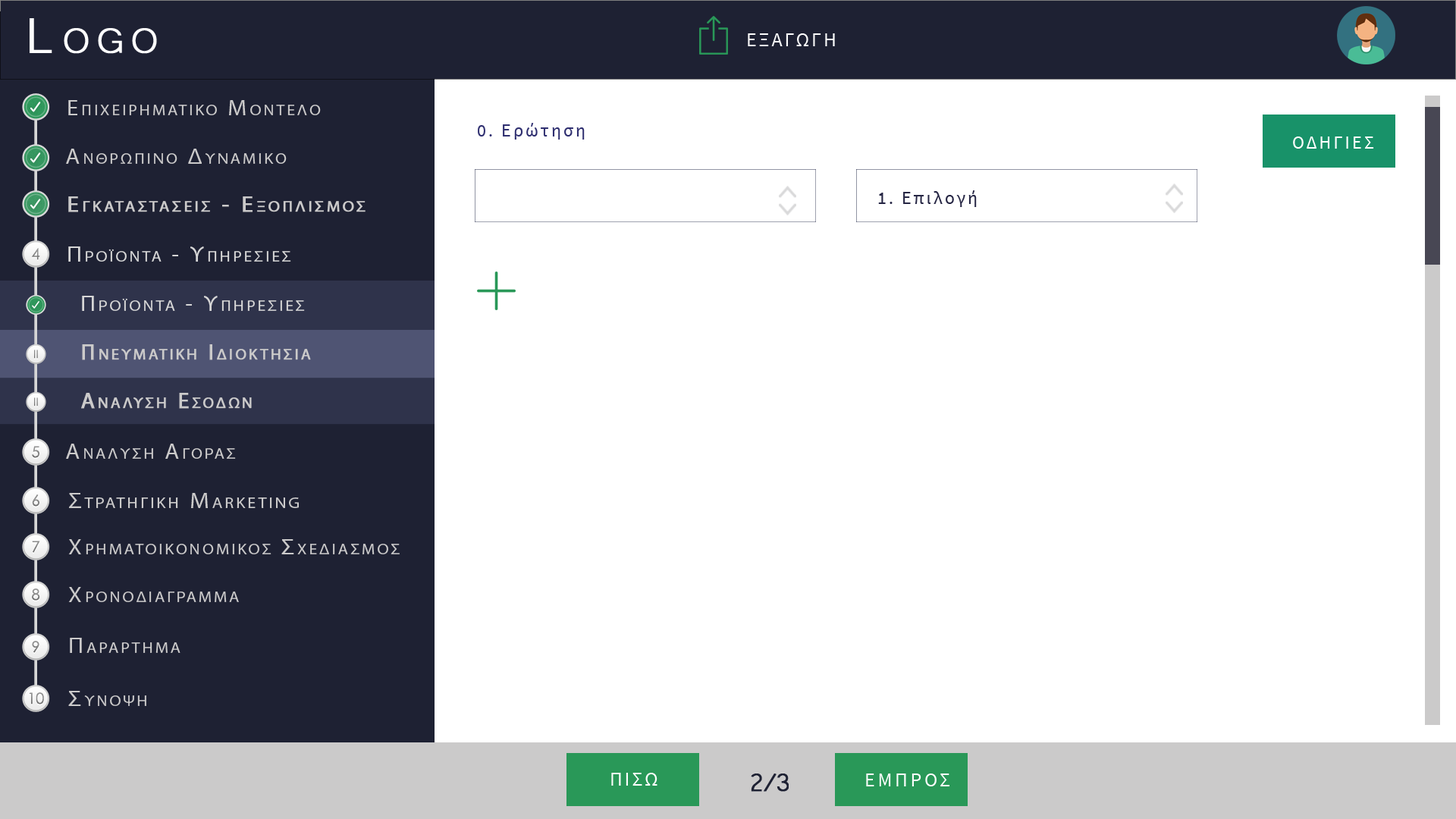
<style>
.page{position:relative;width:1456px;height:819px;background:#ffffff}
.page>*{position:absolute;margin:0}
.t1{font:63.7px "Microsoft-Yi-Baiti";letter-spacing:0.13em;color:#ffffff;font-variant:small-caps;font-weight:bold}
.t2{font:20px "SourceSansPro-Regular";letter-spacing:0.1em;color:#fefefe;text-transform:uppercase}
.t3{font:21.7px "MyriadPro-Regular";letter-spacing:0.13em;color:#cbcaca;font-variant:small-caps;scale:1.09 1}
.t4{font:23.4px "Microsoft-Yi-Baiti";letter-spacing:0.13em;color:#cbcaca;font-variant:small-caps;font-weight:bold}
.t5{font:18.2px "SourceSansPro-Regular";letter-spacing:0.13em;color:#2f2f70}
.t6{font:18.2px "SourceSansPro-Regular";letter-spacing:0.13em;color:#2f2f70;text-transform:uppercase}
.t7{font:18.2px "SourceSansPro-Regular";letter-spacing:0.13em;color:#ffffff;text-transform:uppercase}
.t8{font:21.7px/91px "MyriadPro-Regular";letter-spacing:0.13em;color:#cbcaca;font-variant:small-caps;font-weight:bold;scale:1.09 1}
.t9{font:23.4px/91px "Microsoft-Yi-Baiti";letter-spacing:0.13em;color:#cbcaca;font-variant:small-caps;font-weight:bold}
.t10{font:18.2px "SourceSansPro-Regular";letter-spacing:0.13em;color:#262644}
.t11{font:18.2px "SourceSansPro-Regular";letter-spacing:0.13em;color:#262644;text-transform:uppercase}
.t12{font:15.3px "CenturyGothic";color:#878787}
.t13{font:21.7px "MyriadPro-Regular";letter-spacing:0.13em;color:#d6d6d6;font-variant:small-caps;scale:1.09 1}
.t14{font:23.4px "Microsoft-Yi-Baiti";letter-spacing:0.13em;color:#d6d6d6;font-variant:small-caps;font-weight:bold}
.t15{font:11.2px "CenturyGothic";color:#828282}
.t16{font:22.3px "MyriadPro-Regular";letter-spacing:0.13em;color:#cbcaca;font-variant:small-caps;font-weight:bold}
.t17{font:15.3px "CenturyGothic";color:#898989}
.t18{font:15.3px "CenturyGothic";color:#838383}
.t19{font:22.2px "MyriadPro-Regular";letter-spacing:0.13em;color:#cbcaca;font-variant:small-caps;scale:1.09 1}
.t20{font:25.5px "Microsoft-Yi-Baiti";letter-spacing:0.13em;color:#cbcaca;font-variant:small-caps;font-weight:bold}
.t21{font:15.3px "CenturyGothic";color:#888888}
.t22{font:15.3px "CenturyGothic";color:#8b8b8b}
.t23{font:23.7px "Microsoft-Yi-Baiti";letter-spacing:0.13em;color:#cbcaca;font-variant:small-caps;scale:1.09 1}
.t24{font:32.8px "Microsoft-Yi-Baiti";letter-spacing:-0.1em;color:#1e2133;font-weight:bold}
.t25{font:20px "SourceSansPro-Regular";letter-spacing:0.13em;color:#fefefe;text-transform:uppercase}
</style>
<div class="page">
<p class="t1" style="left:30px;top:18px;width:127px;height:36px">Logo</p>
<p class="t2" style="left:748px;top:33px;width:87px;height:13px">εξαγωγη</p>
<p class="t3" style="left:68px;top:100px;width:253px;height:15px"><span class="t4">   </span>Επιχειρηματικο Μοντελο</p>
<p class="t5" style="left:478px;top:123px;width:107px;height:17px"><span class="t6">0. </span>Ερώτηση</p>
<p class="t7" style="left:1293px;top:136px;width:81px;height:13px">Οδηγιεσ</p>
<p class="t3" style="left:66px;top:149px;width:221px;height:15px"><span class="t4">   </span>Ανθρωπινο Δυναμικο</p>
<p class="t8" style="left:68px;top:196px;width:298px;height:16px"><span class="t9">   </span>Εγκαταστασεισ - Εξοπλισμοσ<br><br><span class="t9">Equipment</span></p>
<p class="t10" style="left:878px;top:190px;width:99px;height:17px"><span class="t11">1. </span>Επιλογή</p>
<p class="t12" style="left:32px;top:248px;width:8px;height:12px">4</p>
<p class="t13" style="left:68px;top:246px;width:223px;height:16px"><span class="t14">   </span>Προϊοντα - Υπηρεσιεσ</p>
<p class="t13" style="left:82px;top:296px;width:223px;height:15px"><span class="t14">   </span>Προϊοντα - Υπηρεσιεσ</p>
<p class="t15" style="left:34px;top:350px;width:4px;height:9px">II</p>
<p class="t16" style="left:82px;top:344px;width:229px;height:16px">Πνευματικη Ιδιοκτησια</p>
<p class="t15" style="left:34px;top:397px;width:4px;height:9px">II</p>
<p class="t16" style="left:81px;top:393px;width:171px;height:16px">Αναλυση Εσοδων</p>
<p class="t17" style="left:32px;top:446px;width:7px;height:12px">5</p>
<p class="t3" style="left:66px;top:444px;width:170px;height:15px"><span class="t4">   </span>Αναλυση Αγορασ</p>
<p class="t18" style="left:32px;top:494px;width:7px;height:13px">6</p>
<p class="t19" style="left:69px;top:493px;width:230px;height:15px"><span class="t20">   </span>Στρατηγικη Marketing</p>
<p class="t21" style="left:32px;top:541px;width:8px;height:12px">7</p>
<p class="t3" style="left:68px;top:539px;width:332px;height:15px"><span class="t20">   </span>Χρηματοικονομικοσ Σχεδιασμοσ</p>
<p class="t22" style="left:32px;top:588px;width:8px;height:13px">8</p>
<p class="t3" style="left:68px;top:587px;width:171px;height:15px"><span class="t20">   </span>Χρονοδιαγραμμα</p>
<p class="t18" style="left:32px;top:641px;width:7px;height:12px">9</p>
<p class="t3" style="left:70px;top:638px;width:110px;height:15px"><span class="t23">   </span>Παραρτημα</p>
<p class="t12" style="left:29px;top:692px;width:15px;height:12px">10</p>
<p class="t3" style="left:68px;top:691px;width:78px;height:15px"><span class="t23">   </span>Συνοψη</p>
<p class="t2" style="left:611px;top:773px;width:46px;height:13px">Πισω</p>
<p class="t24" style="left:751px;top:773px;width:38px;height:19px">2/3</p>
<p class="t25" style="left:866px;top:773px;width:83px;height:13px">εμπροσ</p>
</div>
